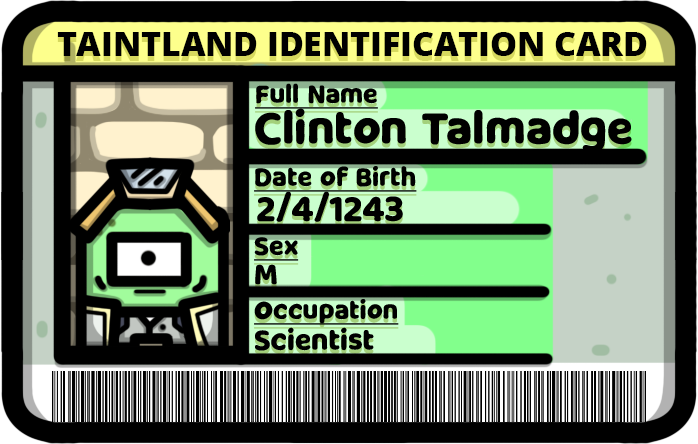
<style>
.page{position:relative;width:698px;height:444px;background:#000000}
.page>*{position:absolute;margin:0}
.t1{font:33.8px "OpenSans-Extrabold";color:#000000}
.t2{font:25.6px "MilkyNiceClean";color:#000000;text-decoration:underline}
.t3{font:44.9px "MilkyNiceClean";color:#000000}
.t4{font:34.8px "MilkyNiceClean";color:#000000}
.t5{font:28.3px "MilkyNiceClean";color:#000000}
</style>
<div class="page">
<p class="t1" style="left:57px;top:32px;width:590px;height:24px">TAINTLAND IDENTIFICATION CARD</p>
<p class="t2" style="left:255px;top:83px;width:123px;height:26px">Full Name</p>
<p class="t3" style="left:255px;top:108px;width:377px;height:46px">Clinton Talmadge</p>
<p class="t2" style="left:254px;top:166px;width:163px;height:26px">Date of Birth</p>
<p class="t4" style="left:257px;top:191px;width:146px;height:31px">2/4/1243</p>
<p class="t2" style="left:254px;top:237px;width:45px;height:24px">Sex</p>
<p class="t5" style="left:255px;top:264px;width:22px;height:21px">M</p>
<p class="t2" style="left:254px;top:299px;width:145px;height:26px">Occupation</p>
<p class="t5" style="left:255px;top:327px;width:119px;height:24px">Scientist</p>
</div>
